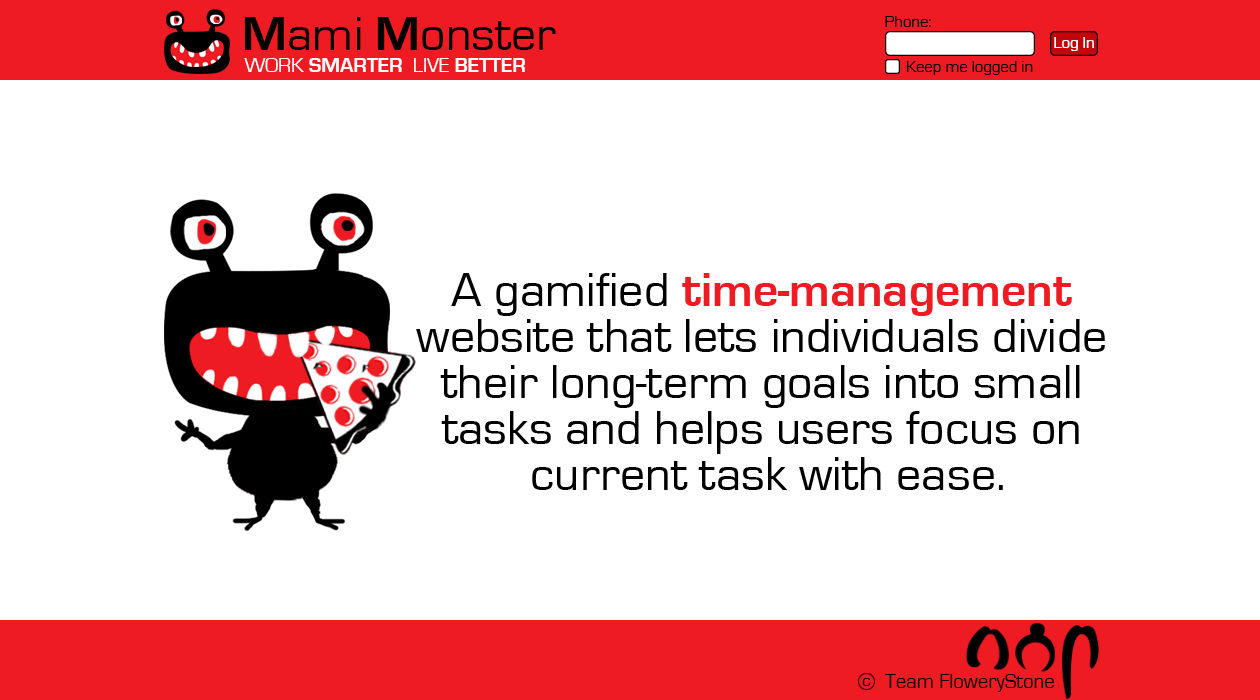
<style>
.page{position:relative;width:1260px;height:700px;background:#ffffff}
.page>*{position:absolute;margin:0}
.t1{font:50px "EurostileRegular";color:#000000}
.t2{font:50px "EurostileBold";color:#000000}
.t3{font:16.7px "EurostileRegular";color:#000000}
.t4{font:16.7px "EurostileRegular";color:#ffffff}
.t5{font:20.8px "EurostileBold";color:#ffffff}
.t6{font:20.8px "EurostileRegular";color:#ffffff}
.t7{font:50px/45.8px "EurostileRegular";color:#000000}
.t8{font:50px/45.8px "EurostileBold";color:#ee1b22}
.t9{font:17.7px "EurostileRegular";color:#000000}
.t10{font:20.8px "EurostileRegular";color:#000000}
</style>
<div class="page">
<p class="t1" style="left:244px;top:17px;width:312px;height:33px"><span class="t2">M</span>ami <span class="t2">M</span>onster</p>
<p class="t3" style="left:885px;top:16px;width:46px;height:11px">Phone:</p>
<p class="t4" style="left:1054px;top:37px;width:40px;height:14px">Log In</p>
<p class="t5" style="left:244px;top:58px;width:281px;height:14px"><span class="t6">WORK </span>SMARTER<span class="t6">  LIVE </span>BETTER</p>
<p class="t3" style="left:906px;top:61px;width:127px;height:14px">Keep me logged in</p>
<p class="t7" style="left:416px;top:273px;width:689px;height:217px;text-align:center">A gamified <span class="t8">time-management</span> <br>website that lets individuals divide <br>their long-term goals into small <br>tasks and helps users focus on <br>current task with ease.</p>
<p class="t9" style="left:862px;top:678px;width:9px;height:8px">c</p>
<p class="t10" style="left:885px;top:674px;width:169px;height:18px">Team FloweryStone</p>
</div>
